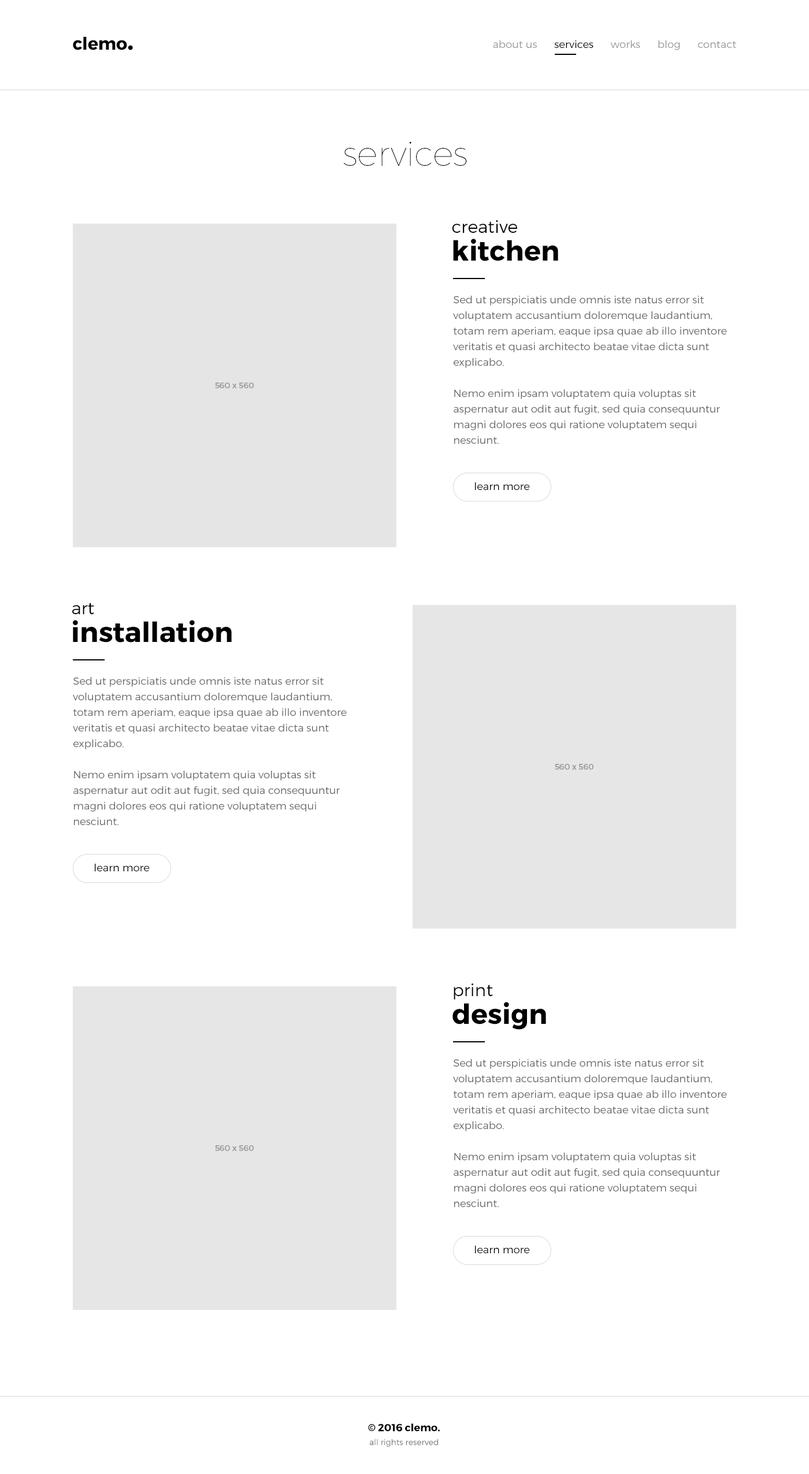
<style>
.page{position:relative;width:809px;height:1474px;background:#ffffff}
.page>*{position:absolute;margin:0}
.t1{font:17.3px "Montserrat-Bold";color:#000000}
.t2{font:27.7px "Montserrat-Bold";color:#000000}
.t3{font:10.4px "Montserrat-Light";color:#979797}
.t4{font:10.4px "Montserrat-Light";color:#989898}
.t5{font:10.4px "Montserrat-Light";color:#000000}
.t6{font:34.7px "Montserrat-Hairline";color:#000000}
.t7{font:17.3px/27.7px "Montserrat-Light";color:#000000}
.t8{font:27.7px/27.7px "Montserrat-Bold";color:#000000}
.t9{font:10.4px/15.6px "Montserrat-Light";color:#656565}
.t10{font:8.1px "Montserrat-Regular";color:#9b9b9b}
.t11{font:8.1px/13.9px "Montserrat-Light";color:#656565}
.t12{font:10.4px/13.9px "Montserrat-Bold";color:#000000}
</style>
<div class="page">
<p class="t1" style="left:73px;top:36px;width:60px;height:14px">clemo<span class="t2">.</span></p>
<p class="t3" style="left:493px;top:40px;width:243px;height:10px"><span class="t4">about us      </span><span class="t5">services      </span>works      blog      contact</p>
<p class="t6" style="left:343px;top:142px;width:124px;height:24px">services</p>
<p class="t7" style="left:452px;top:220px;width:106px;height:41px">creative<br><span class="t8">kitchen</span></p>
<p class="t9" style="left:453px;top:295px;width:274px;height:149px">Sed ut perspiciatis unde omnis iste natus error sit voluptatem accusantium doloremque laudantium, totam rem aperiam, eaque ipsa quae ab illo inventore veritatis et quasi architecto beatae vitae dicta sunt explicabo. <br><br>Nemo enim ipsam voluptatem quia voluptas sit aspernatur aut odit aut fugit, sed quia consequuntur magni dolores eos qui ratione voluptatem sequi nesciunt.</p>
<p class="t10" style="left:215px;top:383px;width:39px;height:5px">560 x 560</p>
<p class="t5" style="left:475px;top:482px;width:55px;height:8px">learn more</p>
<p class="t8" style="left:72px;top:603px;width:160px;height:40px"><span class="t7">art<br></span>installation</p>
<p class="t9" style="left:73px;top:677px;width:274px;height:149px">Sed ut perspiciatis unde omnis iste natus error sit voluptatem accusantium doloremque laudantium, totam rem aperiam, eaque ipsa quae ab illo inventore veritatis et quasi architecto beatae vitae dicta sunt explicabo. <br><br>Nemo enim ipsam voluptatem quia voluptas sit aspernatur aut odit aut fugit, sed quia consequuntur magni dolores eos qui ratione voluptatem sequi nesciunt.</p>
<p class="t10" style="left:555px;top:764px;width:38px;height:6px">560 x 560</p>
<p class="t5" style="left:95px;top:863px;width:55px;height:8px">learn more</p>
<p class="t8" style="left:452px;top:983px;width:94px;height:47px"><span class="t7">print<br></span>design</p>
<p class="t9" style="left:453px;top:1059px;width:274px;height:149px">Sed ut perspiciatis unde omnis iste natus error sit voluptatem accusantium doloremque laudantium, totam rem aperiam, eaque ipsa quae ab illo inventore veritatis et quasi architecto beatae vitae dicta sunt explicabo. <br><br>Nemo enim ipsam voluptatem quia voluptas sit aspernatur aut odit aut fugit, sed quia consequuntur magni dolores eos qui ratione voluptatem sequi nesciunt.</p>
<p class="t10" style="left:215px;top:1145px;width:39px;height:6px">560 x 560</p>
<p class="t5" style="left:475px;top:1245px;width:55px;height:8px">learn more</p>
<p class="t11" style="left:368px;top:1423px;width:72px;height:24px;text-align:center"><span class="t12">© 2016 clemo.<br></span>all rights reserved</p>
</div>
